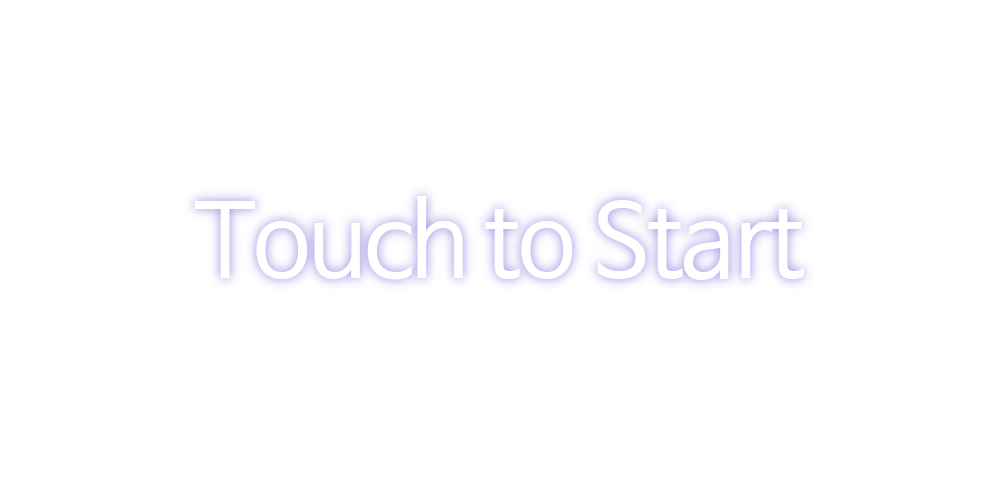
<style>
.page{position:relative;width:1000px;height:484px;background:#ffffff}
.page>*{position:absolute;margin:0}
.t1{font:100px "NanumBarunGothic";letter-spacing:-0.03em;color:#ffffff}
</style>
<div class="page">
<p class="t1" style="left:194px;top:196px;width:610px;height:84px">Touch to Start</p>
</div>
